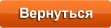
<style>
.page{position:relative;width:111px;height:28px}
.page>*{position:absolute;margin:0}
.t1{font:14px "Arial-BoldMT";color:#ffffff}
</style>
<div class="page">
<p class="t1" style="left:20px;top:7px;width:73px;height:14px">Вернуться</p>
</div>
